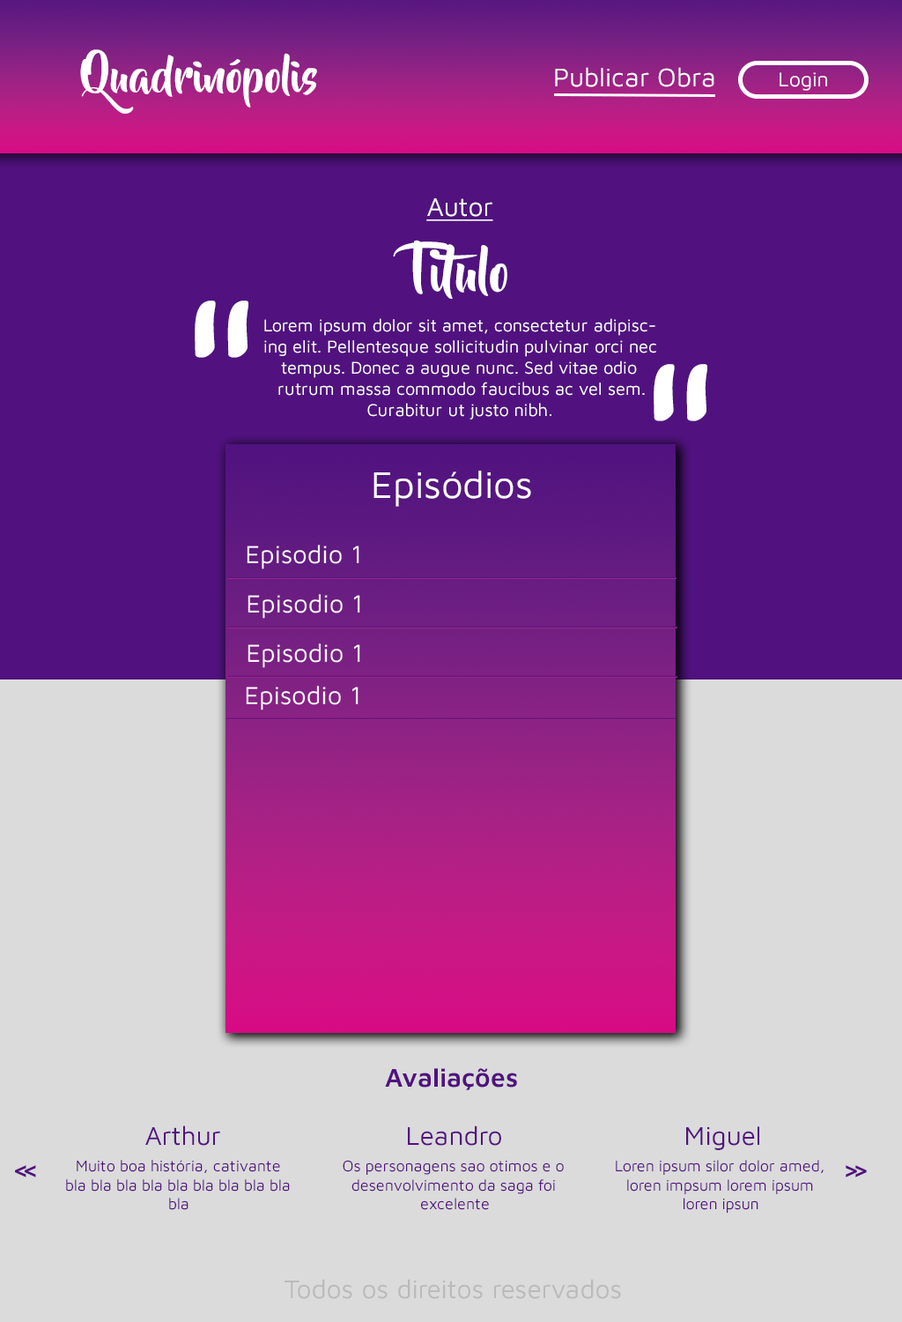
<style>
.page{position:relative;width:902px;height:1322px;background:#dbdbdb}
.page>*{position:absolute;margin:0}
.t1{font:44.1px "BeyondTheMountains";color:#ffffff}
.t2{font:26.4px "MavenPro-Regular";color:#ffffff}
.t3{font:20.6px "MavenPro-Regular";color:#ffffff}
.t4{font:26.4px "MavenPro-Regular";color:#ffffff;text-decoration:underline}
.t5{font:52.9px "BeyondTheMountains";color:#ffffff}
.t6{font:202.7px "BeyondTheMountains";color:#ffffff}
.t7{font:17.6px "MavenPro-Regular";color:#ffffff}
.t8{font:38.4px "MavenPro-Regular";color:#ffffff}
.t9{font:26.4px "MavenPro-SemiBold";color:#51127f}
.t10{font:26.4px "MavenPro-Regular";color:#51127f}
.t11{font:26.4px "MavenPro-SemiBold";letter-spacing:-0.3em;color:#51127f}
.t12{font:15.9px "MavenPro-Regular";color:#51127f}
.t13{font:26.4px "MavenPro-Regular";color:#bbbaba}
</style>
<div class="page">
<p class="t1" style="left:80px;top:49px;width:237px;height:65px">Quadrinópolis</p>
<p class="t2" style="left:555px;top:67px;width:160px;height:20px">Publicar Obra</p>
<p class="t3" style="left:780px;top:72px;width:47px;height:19px">Login</p>
<p class="t4" style="left:426px;top:198px;width:67px;height:23px">Autor</p>
<p class="t5" style="left:393px;top:240px;width:115px;height:59px">Titulo</p>
<p class="t6" style="left:195px;top:300px;width:53px;height:58px">“</p>
<p class="t7" style="left:264px;top:318px;width:392px;height:101px;text-align:center">Lorem ipsum dolor sit amet, consectetur adipiscing elit. Pellentesque sollicitudin pulvinar orci nec tempus. Donec a augue nunc. Sed vitae odio rutrum massa commodo faucibus ac vel sem. Curabitur ut justo nibh.</p>
<p class="t6" style="left:654px;top:364px;width:54px;height:57px">“</p>
<p class="t8" style="left:374px;top:471px;width:157px;height:36px">Episódios</p>
<p class="t9" style="left:385px;top:1068px;width:132px;height:22px">Avaliações</p>
<p class="t10" style="left:145px;top:1125px;width:75px;height:20px">Arthur</p>
<p class="t10" style="left:408px;top:1125px;width:93px;height:20px">Leandro</p>
<p class="t10" style="left:686px;top:1126px;width:74px;height:24px">Miguel</p>
<p class="t11" style="left:15px;top:1165px;width:21px;height:12px">&lt;&lt;</p>
<p class="t12" style="left:66px;top:1160px;width:224px;height:50px;text-align:center">Muito boa história, cativante bla bla bla bla bla bla bla bla bla bla</p>
<p class="t12" style="left:343px;top:1160px;width:221px;height:50px;text-align:center">Os personagens sao otimos e o desenvolvimento da saga foi excelente</p>
<p class="t12" style="left:616px;top:1160px;width:208px;height:52px;text-align:center">Loren ipsum silor dolor amed, loren impsum lorem ipsum loren ipsun</p>
<p class="t11" style="left:846px;top:1165px;width:21px;height:12px">&gt;&gt;</p>
<p class="t13" style="left:285px;top:1278px;width:336px;height:21px">Todos os direitos reservados</p>
</div>
